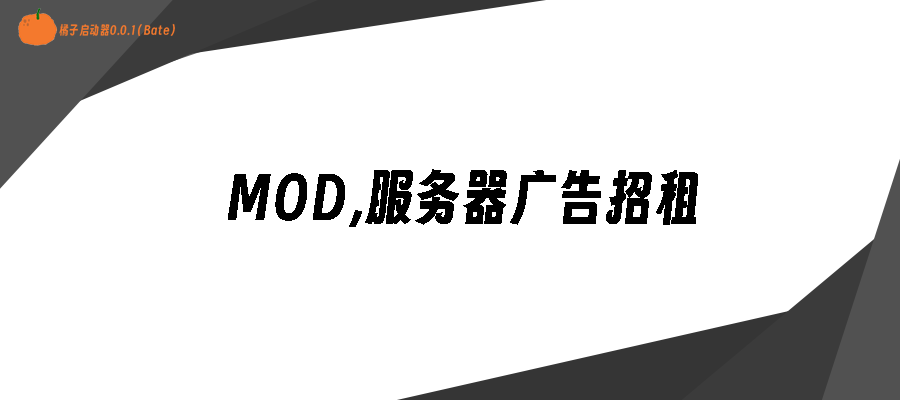
<style>
.page{position:relative;width:900px;height:400px;background:#ffffff}
.page>*{position:absolute;margin:0}
.t1{font:60px "zihunbiantaoti";color:#000000}
</style>
<div class="page">
<p class="t1" style="left:228px;top:169px;width:470px;height:58px">MOD,服务器广告招租</p>
</div>
